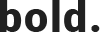
<style>
.page{position:relative;width:100px;height:32px;background:#ffffff}
.page>*{position:absolute;margin:0}
.t1{font:42.7px "Roboto-Black";letter-spacing:0.04em;color:#212121}
</style>
<div class="page">
<p class="t1" style="left:0px;top:0px;width:100px;height:32px">bold.</p>
</div>
